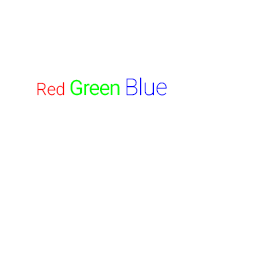
<style>
.page{position:relative;width:256px;height:256px;background:#ffffff}
.page>*{position:absolute;margin:0}
.t1{font:21px "Roboto-Regular";letter-spacing:-0.04em;color:#00ff00}
.t2{font:17px "Roboto-Light";color:#ff0000}
.t3{font:23px "Roboto-Thin";color:#0000ff}
</style>
<div class="page">
<p class="t1" style="left:37px;top:77px;width:130px;height:19px"><span class="t2">Red </span>Green <span class="t3">Blue</span></p>
</div>
